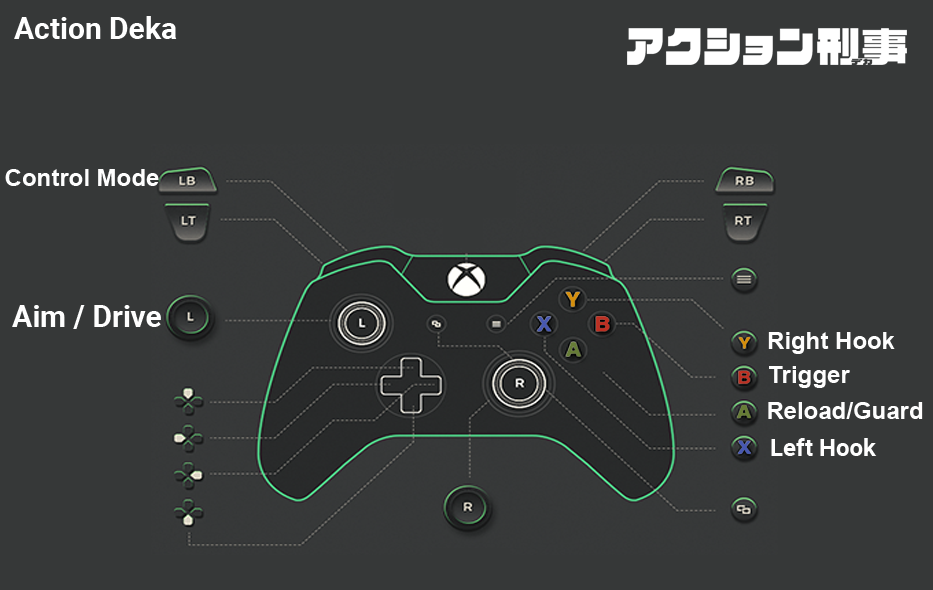
<style>
.page{position:relative;width:933px;height:590px;background:#363838}
.page>*{position:absolute;margin:0}
.t1{font:30px "Roboto-Bold";color:#ffffff}
.t2{font:24px "Arial-BoldMT";color:#fefefe}
.t3{font:30px "Roboto-Bold";color:#fefefe}
.t4{font:24px "Roboto-Bold";color:#ffffff}
</style>
<div class="page">
<p class="t1" style="left:14px;top:16px;width:163px;height:23px">Action Deka</p>
<p class="t2" style="left:5px;top:169px;width:154px;height:17px">Control Mode</p>
<p class="t3" style="left:12px;top:305px;width:149px;height:24px">Aim / Drive</p>
<p class="t2" style="left:768px;top:332px;width:127px;height:22px">Right Hook</p>
<p class="t2" style="left:769px;top:366px;width:81px;height:22px">Trigger</p>
<p class="t2" style="left:768px;top:402px;width:155px;height:17px">Reload/Guard</p>
<p class="t4" style="left:771px;top:438px;width:106px;height:18px">Left Hook</p>
</div>
